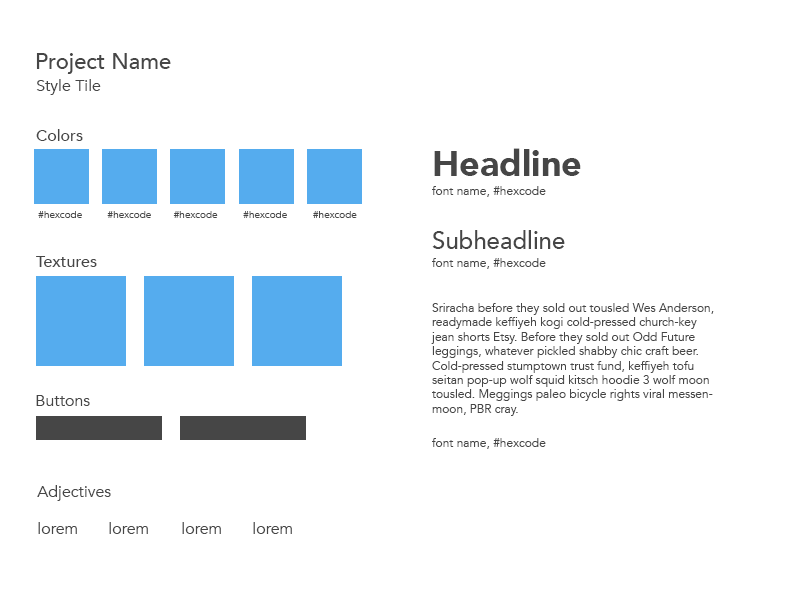
<style>
.page{position:relative;width:792px;height:612px;background:#ffffff}
.page>*{position:absolute;margin:0}
.t1{font:22px "Avenir-Medium";color:#464646}
.t2{font:16px "Avenir-Book";color:#464646}
.t3{font:16px "Avenir-Medium";color:#464646}
.t4{font:36px "Avenir-Black";color:#464646}
.t5{font:12px "Avenir-Book";color:#464646}
.t6{font:10px "Avenir-Book";color:#464646}
.t7{font:24px "Avenir-Medium";color:#464646}
</style>
<div class="page">
<p class="t1" style="left:36px;top:53px;width:135px;height:21px">Project Name</p>
<p class="t2" style="left:36px;top:79px;width:65px;height:16px">Style Tile</p>
<p class="t3" style="left:36px;top:129px;width:47px;height:12px">Colors</p>
<p class="t4" style="left:434px;top:148px;width:147px;height:28px">Headline</p>
<p class="t5" style="left:432px;top:186px;width:114px;height:11px">font name, #hexcode</p>
<p class="t6" style="left:38px;top:211px;width:44px;height:7px">#hexcode</p>
<p class="t6" style="left:107px;top:211px;width:44px;height:7px">#hexcode</p>
<p class="t6" style="left:173px;top:211px;width:45px;height:7px">#hexcode</p>
<p class="t6" style="left:243px;top:211px;width:44px;height:7px">#hexcode</p>
<p class="t6" style="left:313px;top:211px;width:44px;height:7px">#hexcode</p>
<p class="t7" style="left:432px;top:230px;width:133px;height:19px">Subheadline</p>
<p class="t3" style="left:36px;top:256px;width:61px;height:11px">Textures</p>
<p class="t5" style="left:432px;top:258px;width:114px;height:11px">font name, #hexcode</p>
<p class="t5" style="left:431px;top:303px;width:283px;height:113px">Sriracha before they sold out tousled Wes Anderson, readymade keffiyeh kogi cold-pressed church-key jean shorts Etsy. Before they sold out Odd Future leggings, whatever pickled shabby chic craft beer. Cold-pressed stumptown trust fund, keffiyeh tofu seitan pop-up wolf squid kitsch hoodie 3 wolf moon tousled. Meggings paleo bicycle rights viral messenmoon, PBR cray.</p>
<p class="t2" style="left:36px;top:395px;width:54px;height:11px">Buttons</p>
<p class="t5" style="left:432px;top:438px;width:114px;height:11px">font name, #hexcode</p>
<p class="t2" style="left:37px;top:485px;width:74px;height:16px">Adjectives</p>
<p class="t2" style="left:38px;top:522px;width:39px;height:12px">lorem</p>
<p class="t2" style="left:109px;top:522px;width:39px;height:12px">lorem</p>
<p class="t2" style="left:182px;top:522px;width:39px;height:12px">lorem</p>
<p class="t2" style="left:253px;top:522px;width:39px;height:12px">lorem</p>
</div>
